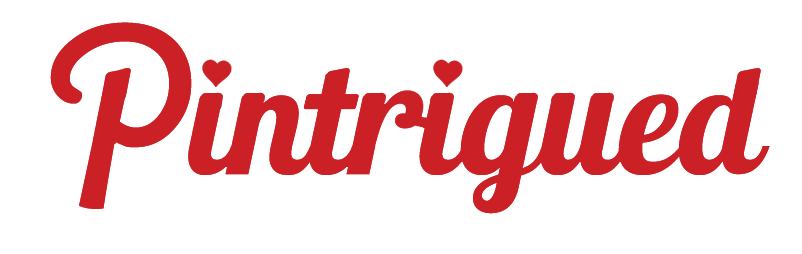
<style>
.page{position:relative;width:802px;height:254px;background:#ffffff}
.page>*{position:absolute;margin:0}
.t1{font:280px "JCfg";letter-spacing:0.06em;color:#cb2026}
.t2{font:156px "Lobster1.4";color:#cb2026}
.t3{font:156px "Lobster1.4";letter-spacing:0.06em;color:#cb2026}
</style>
<div class="page">
<p class="t1" style="left:50px;top:22px;width:142px;height:191px;rotate:-1deg">P</p>
<p class="t2" style="left:188px;top:62px;width:582px;height:152px">int<span class="t3">r</span>igued</p>
</div>
